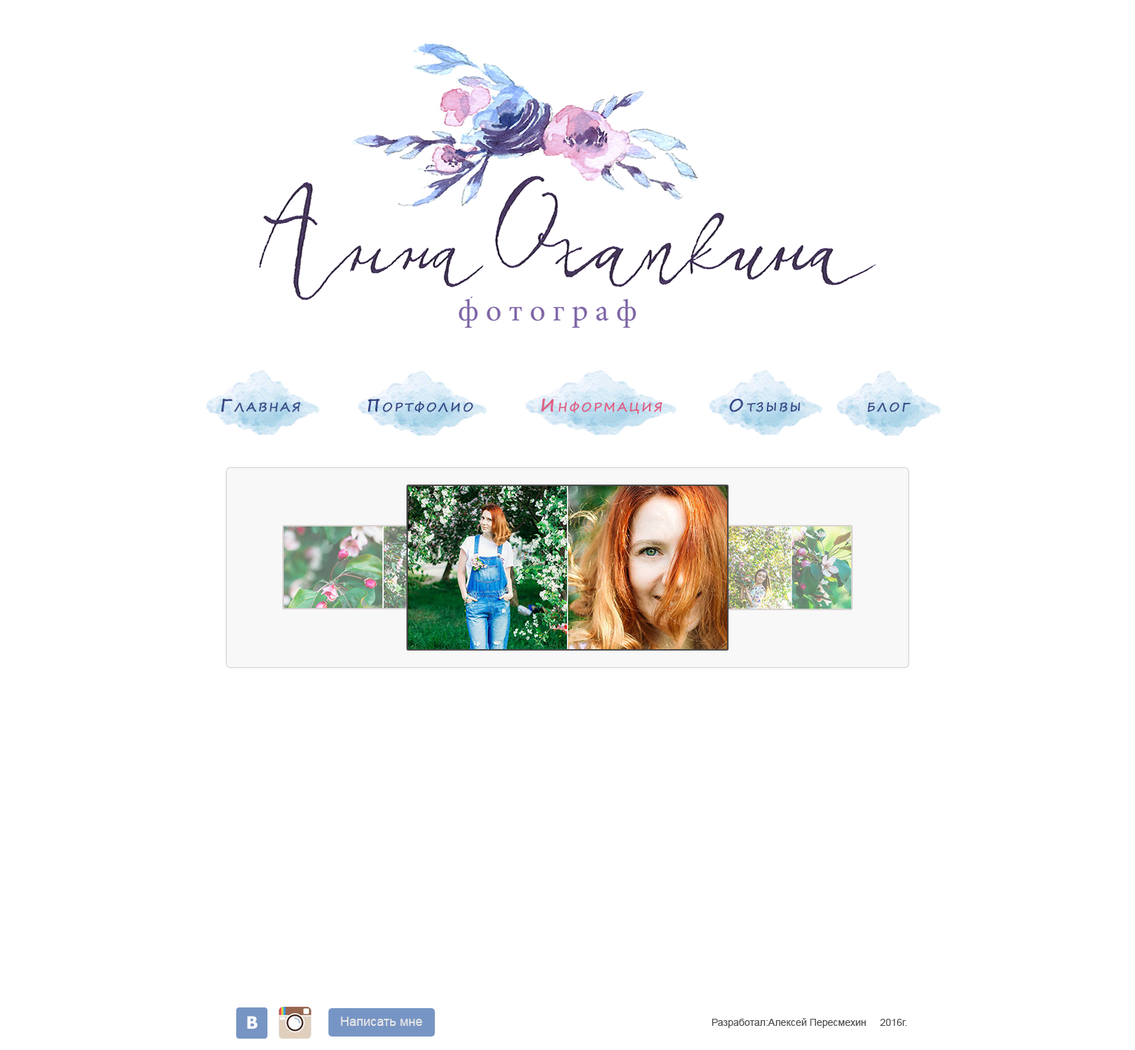
<style>
.page{position:relative;width:1135px;height:1050px;background:#ffffff}
.page>*{position:absolute;margin:0}
.t1{font:17px "SegoePrint-Bold";letter-spacing:0.14em;color:#364886;font-variant:small-caps}
.t2{font:17px "SegoePrint-Bold";letter-spacing:0.14em;color:#de5d83;font-variant:small-caps}
.t3{font:17px "Tahoma-Bold";color:#ffffff}
.t4{font:12.8px "ArialMT";color:#e6e6e6}
.t5{font:12.8px "SegoePrint-Bold";color:#e6e6e6}
.t6{font:9.9px "ArialMT";color:#4c4b4b}
</style>
<div class="page">
<p class="t1" style="left:221px;top:398px;width:690px;height:16px">Главная       Портфолио       <span class="t2">Информация       </span>Отзывы       блог</p>
<p class="t3" style="left:247px;top:1016px;width:11px;height:13px">В</p>
<p class="t4" style="left:341px;top:1017px;width:82px;height:9px"><span class="t5"> </span>Написать мне</p>
<p class="t6" style="left:712px;top:1018px;width:195px;height:10px">Разработал:Алексей Пересмехин     2016г.</p>
</div>
